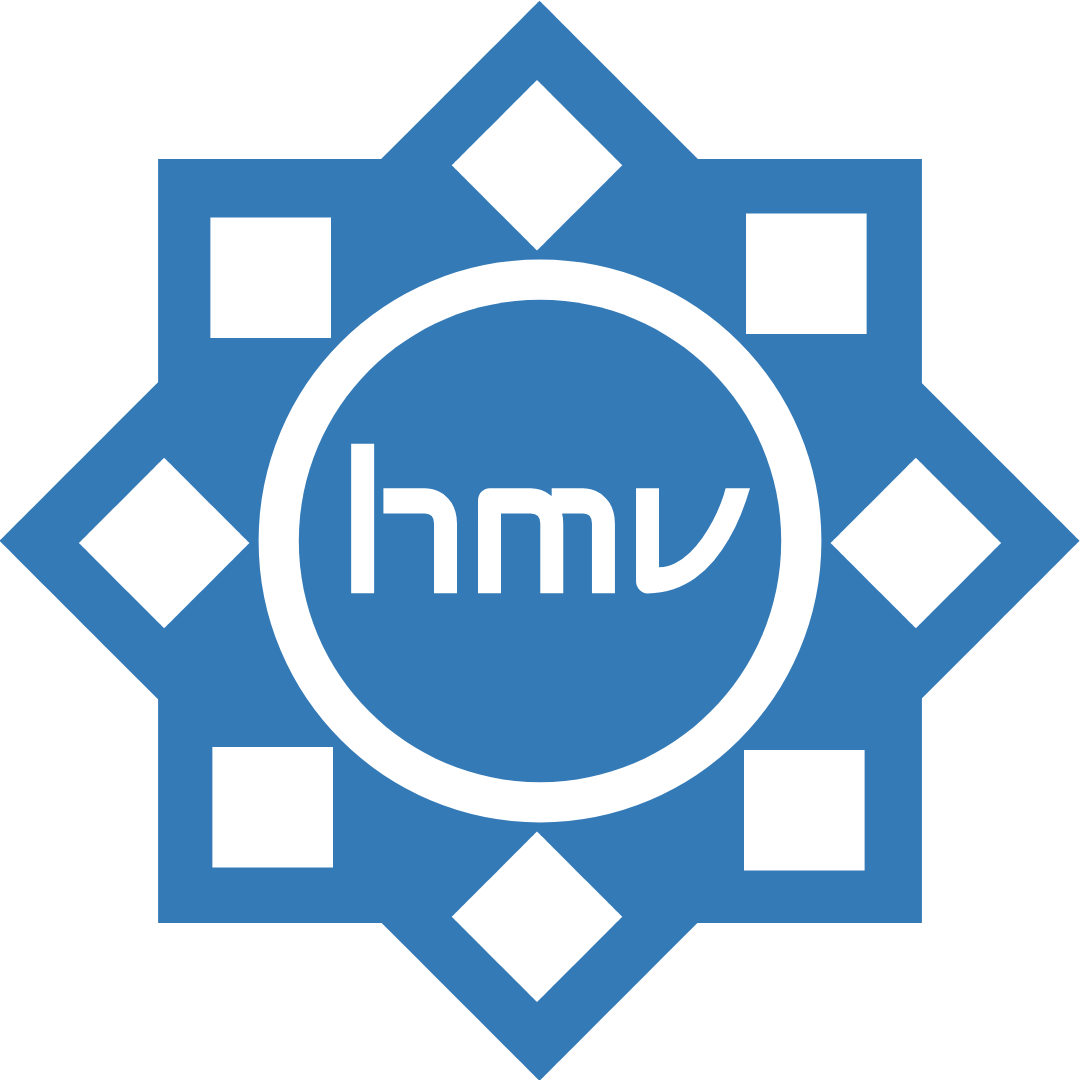
<style>
.page{position:relative;width:1080px;height:1080px;background:#ffffff}
.page>*{position:absolute;margin:0}
.t1{font:199px "Audiowide-Regular";color:#ffffff;scale:0.91 1}
</style>
<div class="page">
<p class="t1" style="left:351px;top:443px;width:399px;height:151px">hmv</p>
</div>
